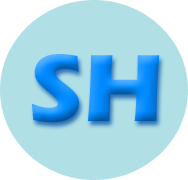
<style>
.page{position:relative;width:188px;height:180px;background:#b0e0e6}
.page>*{position:absolute;margin:0}
.t1{font:98.5px "ErasITC-Bold"}
</style>
<div class="page">
<p class="t1" style="left:31px;top:54px;width:129px;height:69px">SH</p>
</div>
